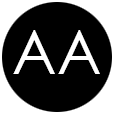
<style>
.page{position:relative;width:114px;height:114px;background:#000000}
.page>*{position:absolute;margin:0}
.t1{font:60px "STHeitiSC-Light";color:#ffffff}
</style>
<div class="page">
<p class="t1" style="left:13px;top:30px;width:87px;height:44px">AA</p>
</div>
